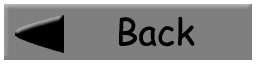
<style>
.page{position:relative;width:256px;height:64px;background:#7f7f7f}
.page>*{position:absolute;margin:0}
.t1{font:36px "ComicSansMS";color:#000000}
</style>
<div class="page">
<p class="t1" style="left:119px;top:16px;width:76px;height:31px">Back</p>
</div>
